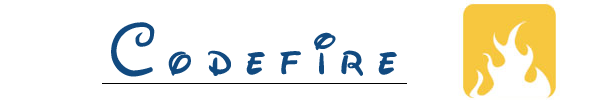
<style>
.page{position:relative;width:600px;height:100px;background:#ffffff}
.page>*{position:absolute;margin:0}
.t1{font:72px "WaltDisneyScript";letter-spacing:0.2em;color:#114a80}
</style>
<div class="page">
<p class="t1" style="left:111px;top:22px;width:286px;height:55px">Codefire</p>
</div>
